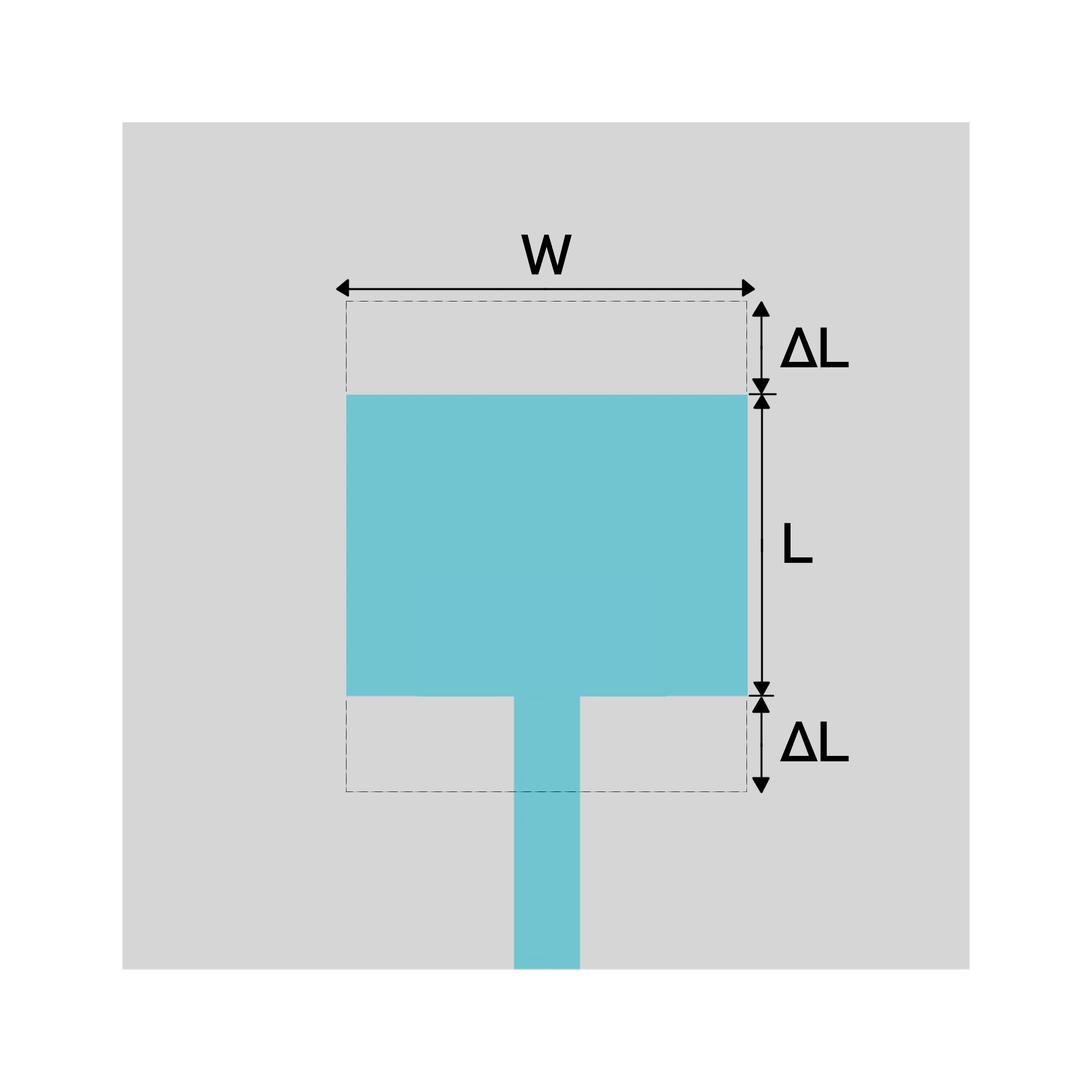
<style>
.page{position:relative;width:1092px;height:1092px;background:#d6d6d6}
.page>*{position:absolute;margin:0}
.t1{font:55.9px "Bahnschrift";letter-spacing:-0.06em;color:#000000;font-weight:bold;font-style:italic;scale:1.1 1}
</style>
<div class="page">
<p class="t1" style="left:521px;top:235px;width:51px;height:40px">W</p>
<p class="t1" style="left:780px;top:327px;width:69px;height:40px">ΔL</p>
<p class="t1" style="left:784px;top:523px;width:29px;height:40px">L</p>
<p class="t1" style="left:780px;top:721px;width:69px;height:40px">ΔL</p>
</div>
